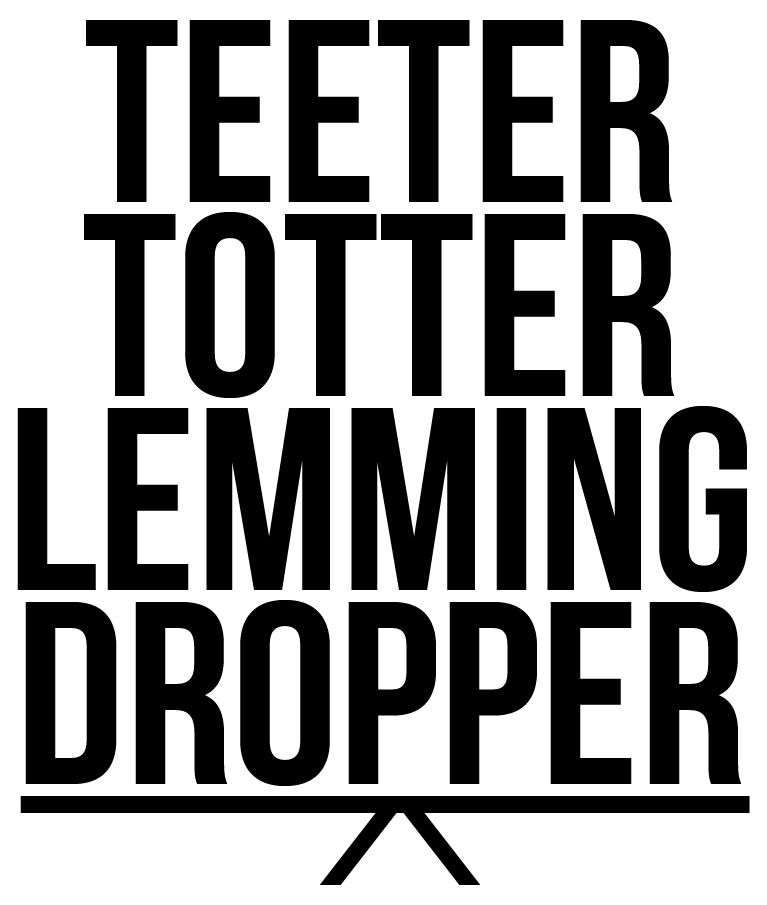
<style>
.page{position:relative;width:767px;height:905px;background:#ffffff}
.page>*{position:absolute;margin:0}
.t1{font:260px/194px "BebasNeue";color:#000000;scale:1.03 1}
</style>
<div class="page">
<p class="t1" style="left:17px;top:20px;width:730px;height:766px;text-align:center">Teeter<br>Totter<br>Lemming<br>Dropper</p>
</div>
